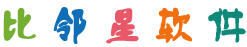
<style>
.page{position:relative;width:247px;height:47px;background:#ffffff}
.page>*{position:absolute;margin:0}
.t1{font:42px "FZLXTJW--GB1-0";letter-spacing:0.2em;color:#74af34;font-weight:bold}
.t2{font:42px "FZLXTJW--GB1-0";letter-spacing:0.2em;color:#116fb8;font-weight:bold}
.t3{font:42px "FZLXTJW--GB1-0";letter-spacing:0.2em;color:#e85869;font-weight:bold}
.t4{font:42px "FZPHTJW--GB1-0";letter-spacing:0.2em;color:#f16f10;font-weight:bold}
.t5{font:42px "FZPHTJW--GB1-0";letter-spacing:0.2em;color:#0e8979;font-weight:bold}
</style>
<div class="page">
<p class="t1" style="left:3px;top:7px;width:243px;height:37px">比<span class="t2">邻</span><span class="t3">星</span><span class="t4">软</span><span class="t5">件</span></p>
</div>
